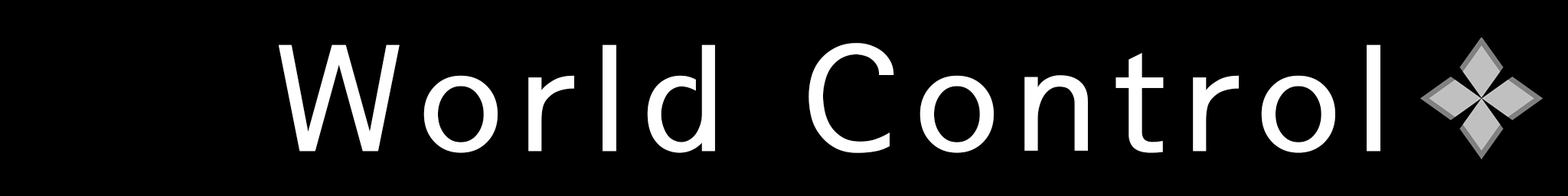
<style>
.page{position:relative;width:1568px;height:196px;background:#000000}
.page>*{position:absolute;margin:0}
.t1{font:147px "SeoulNamsanB";letter-spacing:0.1em;color:#ffffff}
</style>
<div class="page">
<p class="t1" style="left:278px;top:43px;width:1102px;height:110px">World Control</p>
</div>
